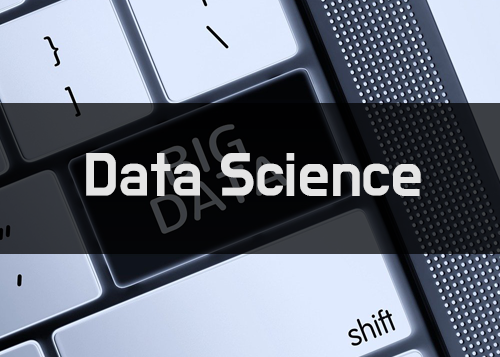
<style>
.page{position:relative;width:500px;height:357px}
.page>*{position:absolute;margin:0}
.t1{font:50px "BMDoHyeon";letter-spacing:0.01em;color:#e5e5e5}
</style>
<div class="page">
<p class="t1" style="left:86px;top:153px;width:335px;height:43px">Data Science</p>
</div>
